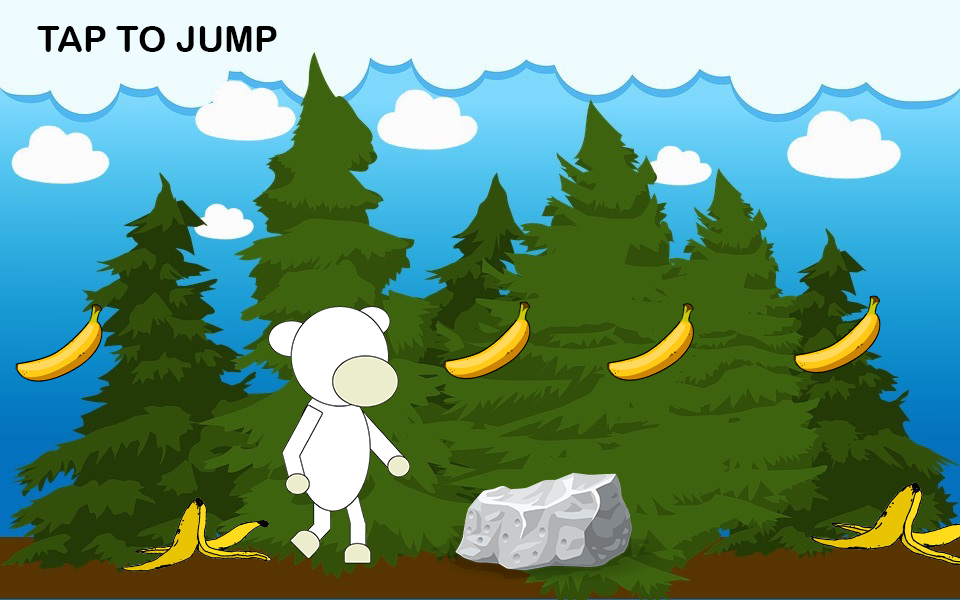
<style>
.page{position:relative;width:960px;height:600px}
.page>*{position:absolute;margin:0}
.t1{font:36px "ArialRoundedMTBold";color:#010000}
</style>
<div class="page">
<p class="t1" style="left:37px;top:26px;width:240px;height:26px">TAP TO JUMP</p>
</div>
